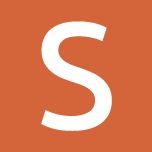
<style>
.page{position:relative;width:152px;height:152px;background:#d46439}
.page>*{position:absolute;margin:0}
.t1{font:156.9px "SukhumvitSet-SemiBold";color:#ffffff}
</style>
<div class="page">
<p class="t1" style="left:41px;top:21px;width:71px;height:110px">S</p>
</div>
